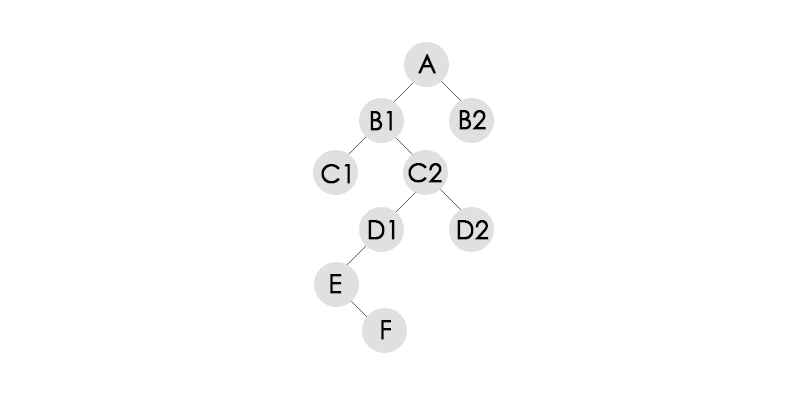
<style>
.page{position:relative;width:800px;height:400px;background:#ffffff}
.page>*{position:absolute;margin:0}
.t1{font:27.3px "CenturyGothic";color:#000000;font-weight:bold;scale:0.91 1}
.t2{font:27.5px "CenturyGothic";color:#000000;font-weight:bold;scale:0.93 1}
</style>
<div class="page">
<p class="t1" style="left:418px;top:54px;width:18px;height:20px">A</p>
<p class="t1" style="left:370px;top:111px;width:22px;height:20px">B1</p>
<p class="t1" style="left:459px;top:110px;width:27px;height:20px">B2</p>
<p class="t1" style="left:321px;top:164px;width:29px;height:20px">C1</p>
<p class="t1" style="left:408px;top:163px;width:34px;height:20px">C2</p>
<p class="t1" style="left:368px;top:220px;width:27px;height:20px">D1</p>
<p class="t1" style="left:457px;top:220px;width:32px;height:20px">D2</p>
<p class="t1" style="left:330px;top:274px;width:12px;height:20px">E</p>
<p class="t2" style="left:381px;top:320px;width:10px;height:20px">F</p>
</div>
